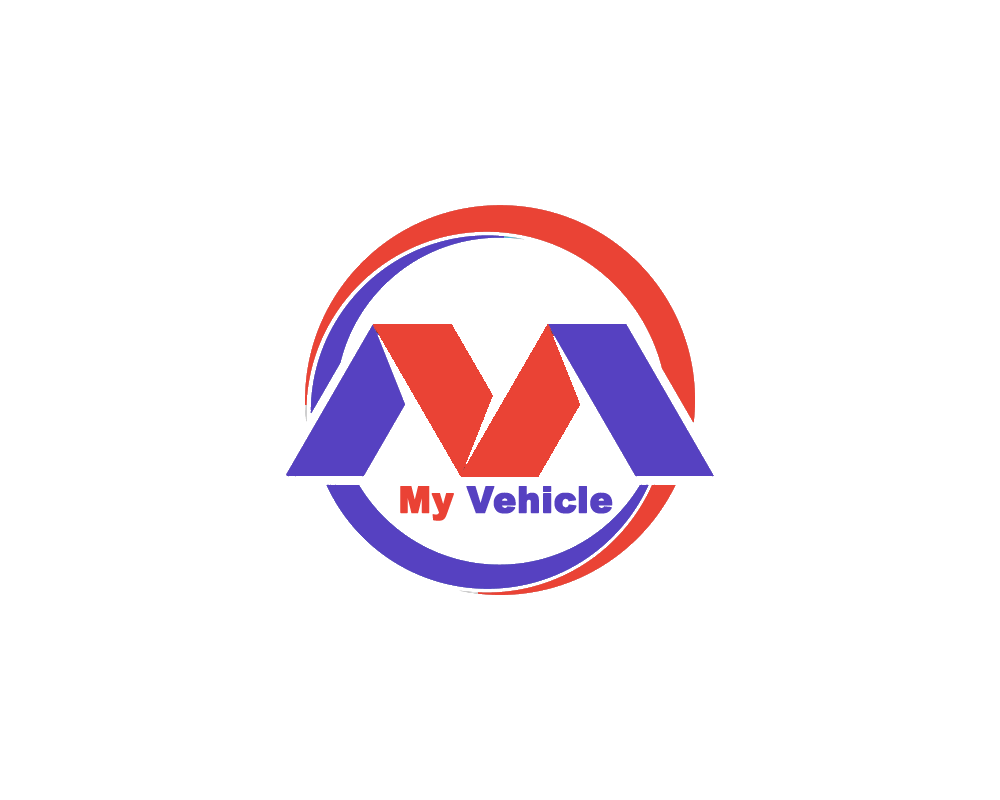
<style>
.page{position:relative;width:1000px;height:800px;background:#ffffff}
.page>*{position:absolute;margin:0}
.t1{font:36.4px "Arial-Black";color:#5641c1;font-weight:bold;scale:0.96 1}
.t2{font:36.4px "Arial-Black";color:#ea4235;font-weight:bold;scale:0.96 1}
</style>
<div class="page">
<p class="t1" style="left:400px;top:486px;width:213px;height:35px"><span class="t2">My </span>Vehicle</p>
</div>
